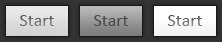
<style>
.page{position:relative;width:222px;height:42px}
.page>*{position:absolute;margin:0}
.t1{font:18px "Calibri"}
.t2{font:18px "Calibri";color:#4c4c4c}
</style>
<div class="page">
<p class="t1" style="left:20px;top:15px;width:34px;height:11px">Start</p>
<p class="t2" style="left:94px;top:15px;width:34px;height:11px">Start</p>
<p class="t1" style="left:168px;top:15px;width:34px;height:11px">Start</p>
</div>
